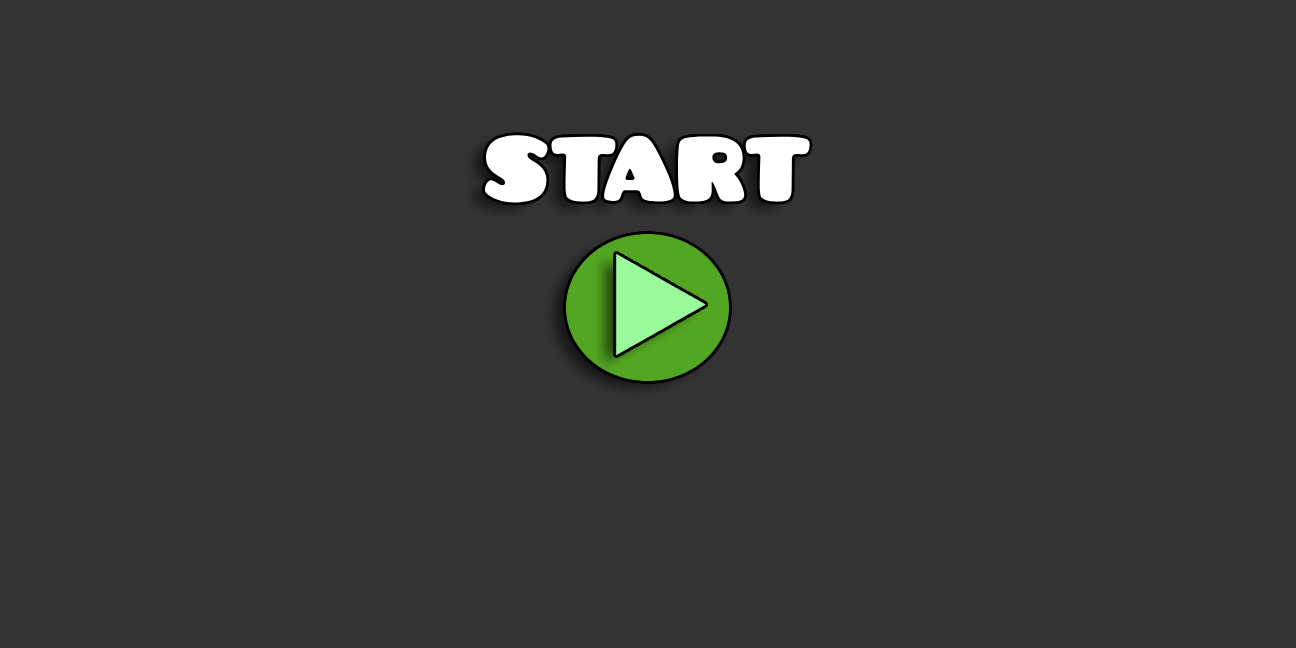
<style>
.page{position:relative;width:1296px;height:648px;background:#333333}
.page>*{position:absolute;margin:0}
.t1{font:100px "Pusab";color:#ffffff}
</style>
<div class="page">
<p class="t1" style="left:485px;top:134px;width:325px;height:69px">START</p>
</div>
